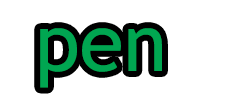
<style>
.page{position:relative;width:239px;height:108px;background:#ffffff}
.page>*{position:absolute;margin:0}
.t1{font:80px "TrebuchetMS";color:#00a651}
</style>
<div class="page">
<p class="t1" style="left:40px;top:28px;width:122px;height:60px">pen</p>
</div>
